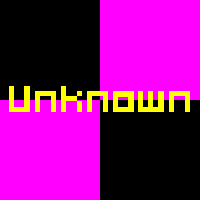
<style>
.page{position:relative;width:200px;height:200px;background:#ff00ff}
.page>*{position:absolute;margin:0}
.t1{font:41.3px "Hooge0555";color:#ffff00}
</style>
<div class="page">
<p class="t1" style="left:9px;top:86px;width:181px;height:26px">Unknown</p>
</div>
